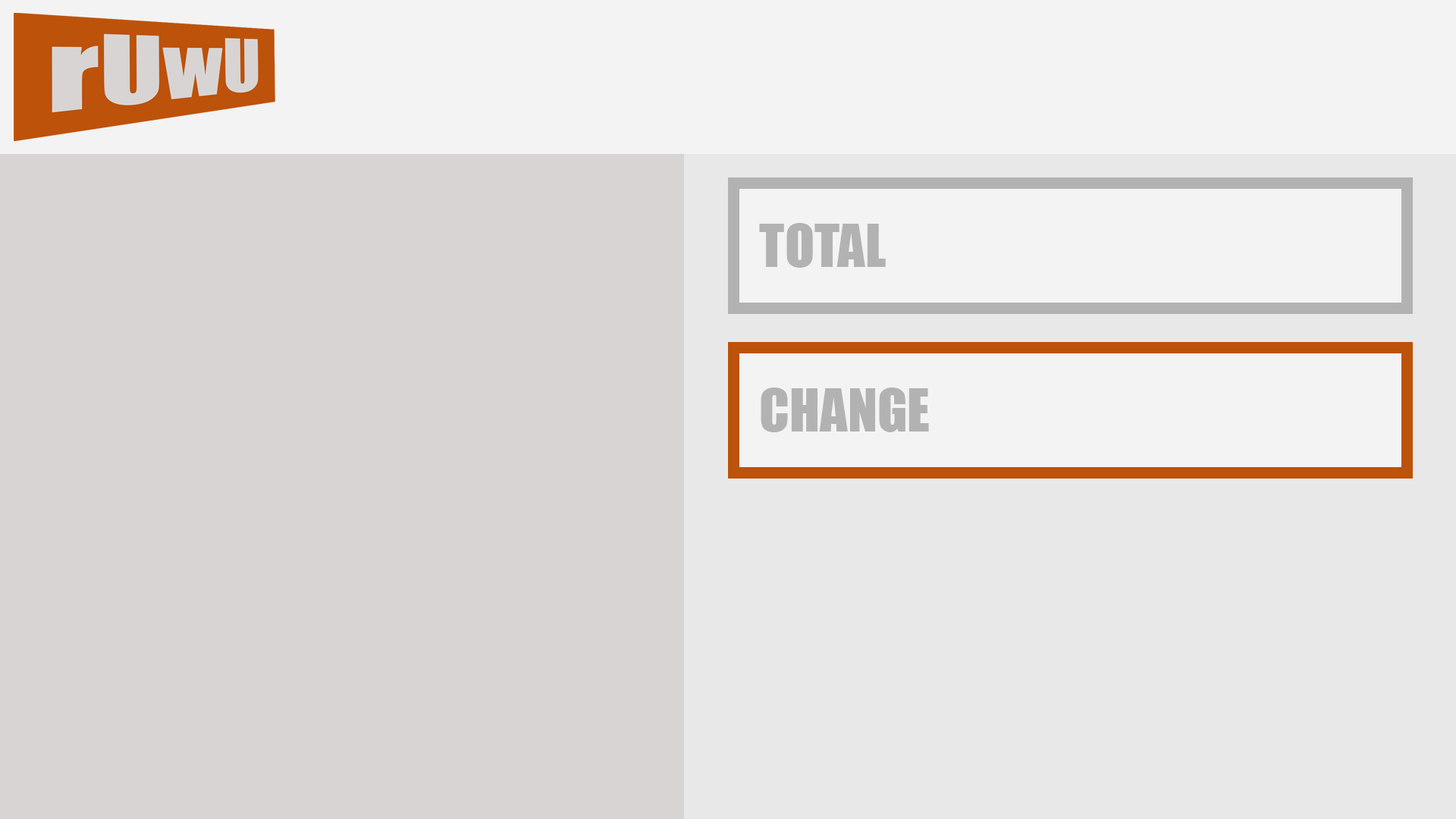
<style>
.page{position:relative;width:1456px;height:819px;background:#d7d4d3}
.page>*{position:absolute;margin:0}
.t1{font:54.6px "Impact";color:#b2b2b2}
</style>
<div class="page">
<p class="t1" style="left:759px;top:223px;width:127px;height:45px">TOTAL</p>
<p class="t1" style="left:761px;top:388px;width:168px;height:44px">CHANGE</p>
</div>
